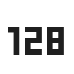
<style>
.page{position:relative;width:74px;height:74px;background:#ffffff}
.page>*{position:absolute;margin:0}
.t1{font:45px "04b24";color:#1f1f1f}
</style>
<div class="page">
<p class="t1" style="left:8px;top:27px;width:56px;height:28px">128</p>
</div>
